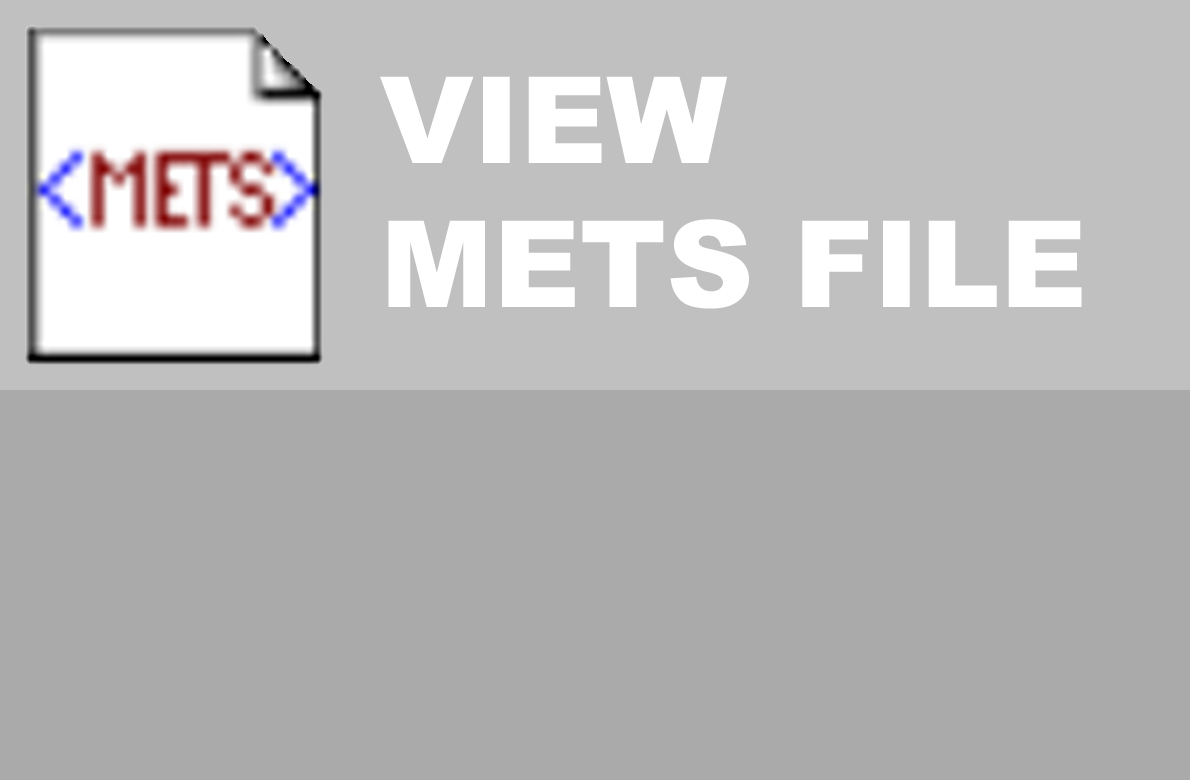
<style>
.page{position:relative;width:1190px;height:780px;background:#aaaaaa}
.page>*{position:absolute;margin:0}
.t1{font:120px "Arial-Black";color:#ffffff}
</style>
<div class="page">
<p class="t1" style="left:380px;top:76px;width:702px;height:233px">VIEW <br>METS FILE</p>
</div>
